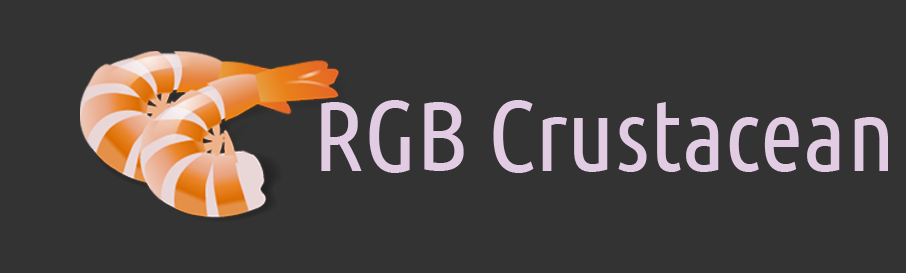
<style>
.page{position:relative;width:906px;height:273px;background:#333333}
.page>*{position:absolute;margin:0}
.t1{font:100px "UbuntuCondensed-Regular";color:#e2cce3}
</style>
<div class="page">
<p class="t1" style="left:321px;top:100px;width:567px;height:73px">RGB Crustacean</p>
</div>
